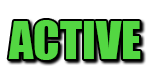
<style>
.page{position:relative;width:150px;height:80px;background:#ffffff}
.page>*{position:absolute;margin:0}
.t1{font:48px "Impact";color:#53d742}
</style>
<div class="page">
<p class="t1" style="left:8px;top:20px;width:133px;height:40px">ACTIVE</p>
</div>
